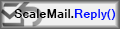
<style>
.page{position:relative;width:120px;height:29px;background:#f0f0f0}
.page>*{position:absolute;margin:0}
.t1{font:12px "Mangal-Bold";color:#000000}
.t2{font:12px "Mangal-Bold";color:#0012ff}
.t3{font:12px "Mangal-Bold";color:#000cff}
</style>
<div class="page">
<p class="t1" style="left:14px;top:9px;width:102px;height:11px"><span class="t2">()</span>ScaleMail.<span class="t3">Reply</span></p>
</div>
